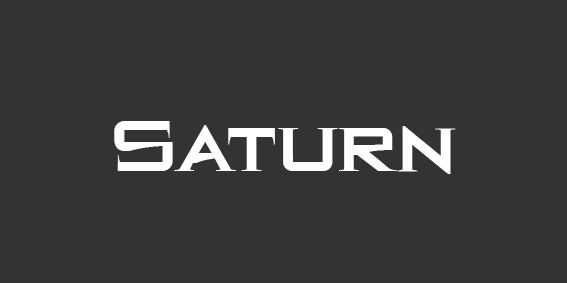
<style>
.page{position:relative;width:567px;height:283px;background:#333333}
.page>*{position:absolute;margin:0}
.t1{font:100px "BlackHoleBB";color:#ffffff}
</style>
<div class="page">
<p class="t1" style="left:114px;top:121px;width:342px;height:53px">Saturn</p>
</div>
